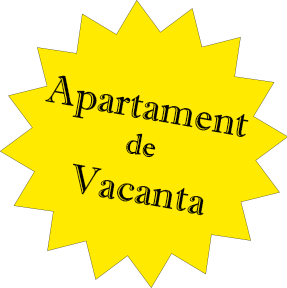
<style>
.page{position:relative;width:287px;height:288px;background:#ffea00}
.page>*{position:absolute;margin:0}
.t1{font:40px "ImprintMT-Shadow";color:#000000}
.t2{font:30px "ImprintMT-Shadow";color:#000000}
</style>
<div class="page">
<p class="t1" style="left:45px;top:75px;width:204px;height:141px;text-align:center;rotate:10deg">Apartament <span class="t2">de<br></span>Vacanta</p>
</div>
